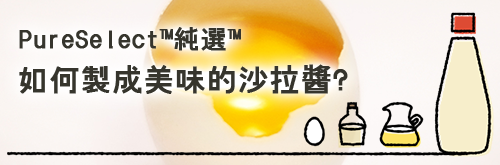
<style>
.page{position:relative;width:500px;height:165px}
.page>*{position:absolute;margin:0}
.t1{font:25.8px "Konatu-Tohaba";letter-spacing:0.02em;color:#36352d;font-weight:bold}
.t2{font:30.1px "Konatu-Tohaba";letter-spacing:0.02em;color:#36352d;font-weight:bold}
</style>
<div class="page">
<p class="t1" style="left:19px;top:27px;width:222px;height:24px">PureSelect™純選™</p>
<p class="t2" style="left:19px;top:64px;width:329px;height:30px">如何製成美味的沙拉醬?</p>
</div>
